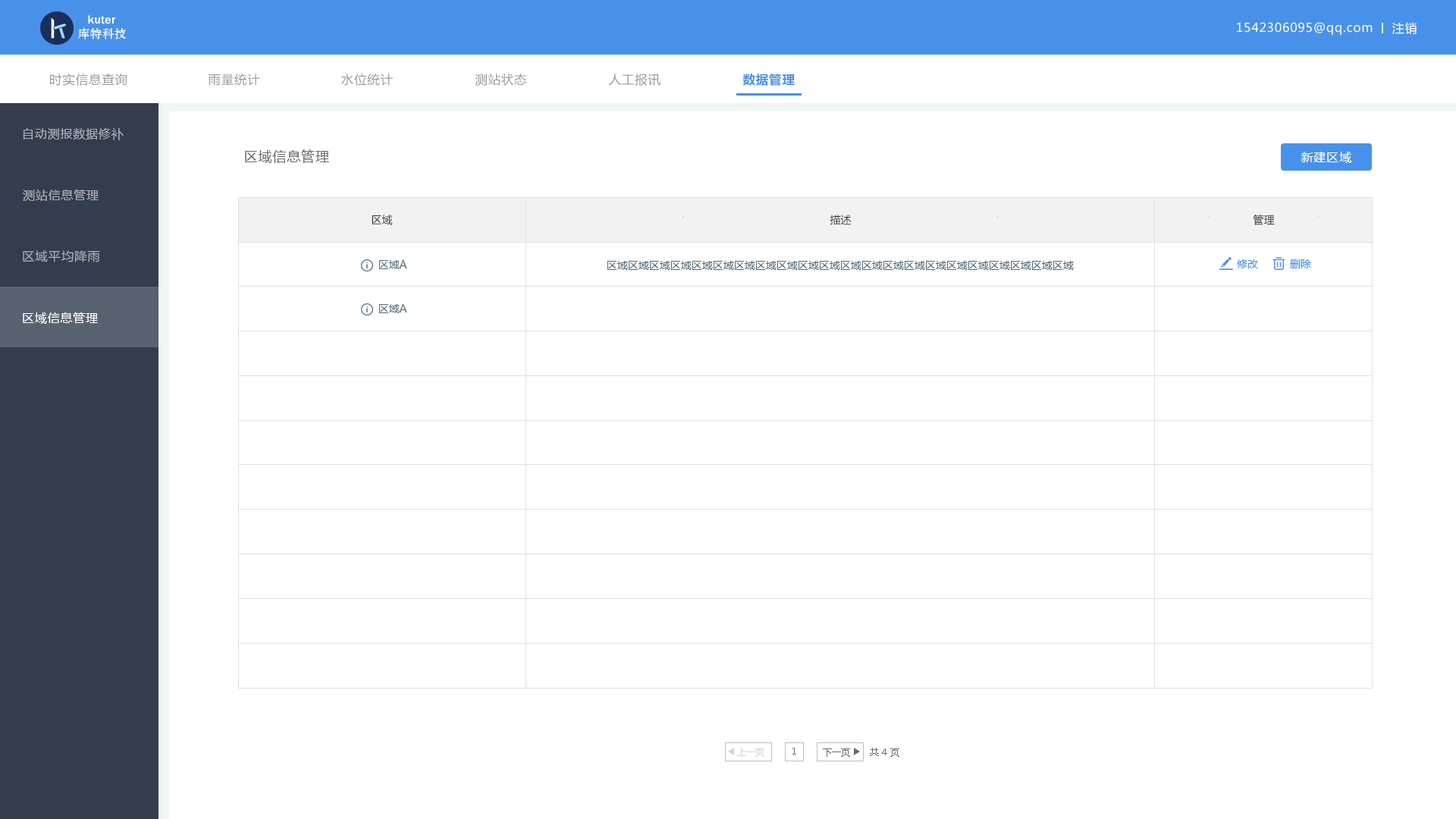
<style>
.page{position:relative;width:1456px;height:819px;background:#ffffff}
.page>*{position:absolute;margin:0}
.t1{font:12.1px "MicrosoftYaHei";letter-spacing:0.05em;color:#ffffff}
.t2{font:12.1px "MicrosoftYaHei";letter-spacing:0.05em;color:#999999}
.t3{font:12.1px "MicrosoftYaHei-Bold";letter-spacing:0.05em;color:#4891ea}
.t4{font:12.1px "MicrosoftYaHei";letter-spacing:0.05em;color:#aeb0b5}
.t5{font:13.6px "MicrosoftYaHei";letter-spacing:0.05em;color:#696969}
.t6{font:10.6px "MicrosoftYaHei";color:#333333}
.t7{font:10.6px "MicrosoftYaHei";color:#50697a}
.t8{font:10.6px "MicrosoftYaHei";color:#4891ea}
.t9{font:9.1px "MicrosoftYaHei";color:#d2d2d2}
.t10{font:9.1px "MicrosoftYaHei";color:#696969}
</style>
<div class="page">
<p class="t1" style="left:1237px;top:22px;width:136px;height:13px">1542306095@qq.com</p>
<p class="t1" style="left:1392px;top:22px;width:25px;height:12px">注销</p>
<p class="t2" style="left:50px;top:74px;width:77px;height:12px">时实信息查询</p>
<p class="t2" style="left:208px;top:74px;width:52px;height:12px">雨量统计</p>
<p class="t2" style="left:341px;top:74px;width:52px;height:12px">水位统计</p>
<p class="t2" style="left:475px;top:74px;width:52px;height:12px">测站状态</p>
<p class="t2" style="left:608px;top:74px;width:52px;height:12px">人工报讯</p>
<p class="t3" style="left:742px;top:74px;width:53px;height:12px">数据管理</p>
<p class="t4" style="left:24px;top:128px;width:100px;height:12px">自动测报数据修补</p>
<p class="t5" style="left:245px;top:149px;width:84px;height:14px">区域信息管理</p>
<p class="t1" style="left:1301px;top:152px;width:50px;height:11px">新建区域</p>
<p class="t4" style="left:23px;top:190px;width:76px;height:11px">测站信息管理</p>
<p class="t6" style="left:372px;top:215px;width:21px;height:10px">区域</p>
<p class="t6" style="left:830px;top:215px;width:22px;height:10px">描述</p>
<p class="t6" style="left:1253px;top:215px;width:22px;height:10px">管理</p>
<p class="t4" style="left:23px;top:250px;width:77px;height:12px">区域平均降雨</p>
<p class="t7" style="left:379px;top:260px;width:28px;height:9px">区域A</p>
<p class="t7" style="left:607px;top:261px;width:467px;height:9px">区域区域区域区域区域区域区域区域区域区域区域区域区域区域区域区域区域区域区域区域区域区域</p>
<p class="t8" style="left:1237px;top:259px;width:21px;height:9px">修改</p>
<p class="t8" style="left:1290px;top:259px;width:21px;height:9px">删除</p>
<p class="t7" style="left:379px;top:304px;width:28px;height:9px">区域A</p>
<p class="t1" style="left:23px;top:312px;width:75px;height:12px">区域信息管理</p>
<p class="t9" style="left:737px;top:748px;width:27px;height:9px">上一页</p>
<p class="t10" style="left:792px;top:748px;width:4px;height:7px">1</p>
<p class="t10" style="left:823px;top:748px;width:27px;height:9px">下一页</p>
<p class="t10" style="left:870px;top:748px;width:29px;height:9px">共 4 页</p>
</div>
